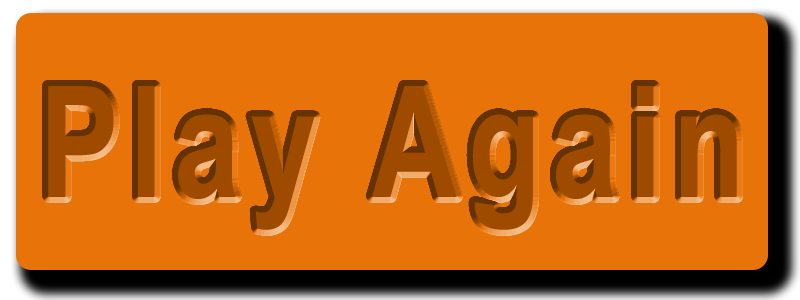
<style>
.page{position:relative;width:800px;height:300px;background:#e87409}
.page>*{position:absolute;margin:0}
.t1{font:154.8px "Arial-BoldMT";letter-spacing:0.105em;color:#9e4b00;scale:0.76 1}
</style>
<div class="page">
<p class="t1" style="left:48px;top:86px;width:689px;height:144px">Play Again</p>
</div>
